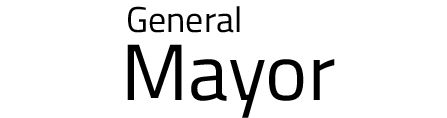
<style>
.page{position:relative;width:447px;height:118px;background:#ffffff}
.page>*{position:absolute;margin:0}
.t1{font:36px "TitilliumWeb-Regular";color:#000000}
.t2{font:80px "TitilliumWeb-Regular";color:#000000}
</style>
<div class="page">
<p class="t1" style="left:128px;top:6px;width:112px;height:27px">General</p>
<p class="t2" style="left:127px;top:44px;width:208px;height:74px">Mayor</p>
</div>
